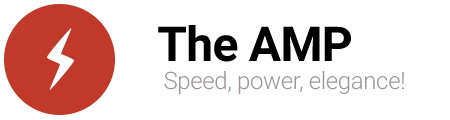
<style>
.page{position:relative;width:450px;height:120px;background:#ffffff}
.page>*{position:absolute;margin:0}
.t1{font:48px "Roboto-Bold";letter-spacing:-0.015em;color:#000000}
.t2{font:24px "Roboto-Light";letter-spacing:-0.015em;color:#9f9696}
</style>
<div class="page">
<p class="t1" style="left:158px;top:25px;width:193px;height:37px">The AMP</p>
<p class="t2" style="left:164px;top:71px;width:240px;height:23px">Speed, power, elegance!</p>
</div>
